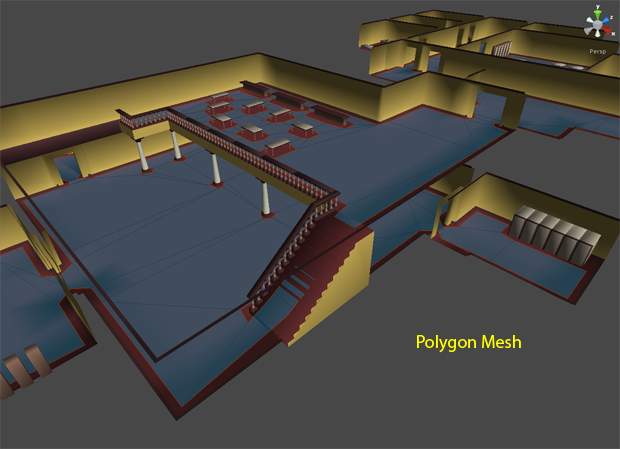
<style>
.page{position:relative;width:620px;height:449px;background:#474747}
.page>*{position:absolute;margin:0}
.t1{font:18px "MyriadPro-Regular";color:#ffff00}
</style>
<div class="page">
<p class="t1" style="left:417px;top:335px;width:104px;height:18px">Polygon Mesh</p>
</div>
